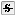
<style>
.page{position:relative;width:16px;height:16px;background:#ffffff}
.page>*{position:absolute;margin:0}
.t1{font:11px "TimesNewRomanPS-BoldMT";color:#000000}
</style>
<div class="page">
<p class="t1" style="left:5px;top:4px;width:5px;height:8px">S</p>
</div>
